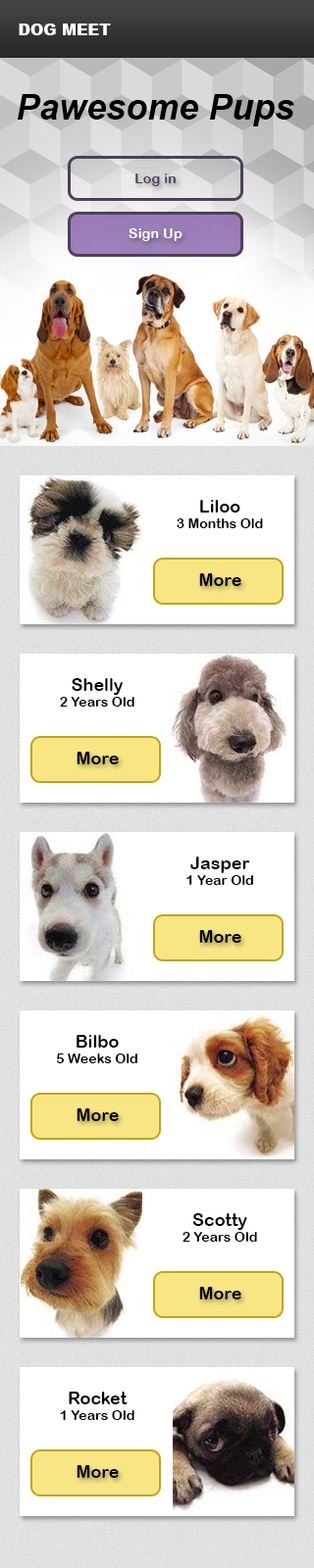
<style>
.page{position:relative;width:314px;height:1568px;background:#ffffff}
.page>*{position:absolute;margin:0}
.t1{font:15.7px "Arial-Black";color:#ffffff}
.t2{font:35.3px "Arial-BoldItalicMT";color:#000000}
.t3{font:14.1px "ArialRoundedMTBold";color:#4f3e5e}
.t4{font:14.1px "ArialRoundedMTBold";color:#ffffff}
.t5{font:13.7px "ArialRoundedMTBold";color:#000000}
.t6{font:17.6px "ArialRoundedMTBold";color:#000000}
</style>
<div class="page">
<p class="t1" style="left:19px;top:24px;width:92px;height:11px">DOG MEET</p>
<p class="t2" style="left:18px;top:94px;width:276px;height:32px">Pawesome Pups</p>
<p class="t3" style="left:135px;top:173px;width:40px;height:13px">Log in</p>
<p class="t4" style="left:128px;top:228px;width:54px;height:13px">Sign Up</p>
<p class="t5" style="left:176px;top:500px;width:87px;height:28px;text-align:center"><span class="t6">Liloo<br></span>3 Months Old</p>
<p class="t6" style="left:199px;top:573px;width:42px;height:13px">More</p>
<p class="t5" style="left:60px;top:678px;width:74px;height:29px;text-align:center"><span class="t6">Shelly<br></span>2 Years Old</p>
<p class="t6" style="left:76px;top:752px;width:43px;height:12px">More</p>
<p class="t5" style="left:186px;top:857px;width:67px;height:28px;text-align:center"><span class="t6">Jasper<br></span>1 Year Old</p>
<p class="t6" style="left:199px;top:930px;width:42px;height:13px">More</p>
<p class="t5" style="left:57px;top:1035px;width:80px;height:28px;text-align:center"><span class="t6">Bilbo<br></span>5 Weeks Old</p>
<p class="t6" style="left:76px;top:1108px;width:43px;height:13px">More</p>
<p class="t5" style="left:182px;top:1213px;width:75px;height:29px;text-align:center"><span class="t6">Scotty<br></span>2 Years Old</p>
<p class="t6" style="left:199px;top:1287px;width:42px;height:12px">More</p>
<p class="t5" style="left:60px;top:1392px;width:74px;height:28px;text-align:center"><span class="t6">Rocket<br></span>1 Years Old</p>
<p class="t6" style="left:76px;top:1465px;width:43px;height:13px">More</p>
</div>
